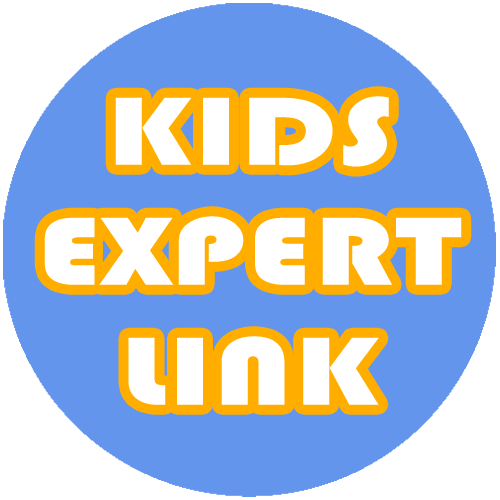
<style>
.page{position:relative;width:500px;height:500px;background:#6495ed}
.page>*{position:absolute;margin:0}
.t1{font:100px "Bauhaus93";letter-spacing:0.025em;color:#ffffff;scale:1.3 1}
</style>
<div class="page">
<p class="t1" style="left:44px;top:96px;width:418px;height:309px;text-align:center">KIDS <br>EXPERT<br>LINK</p>
</div>
